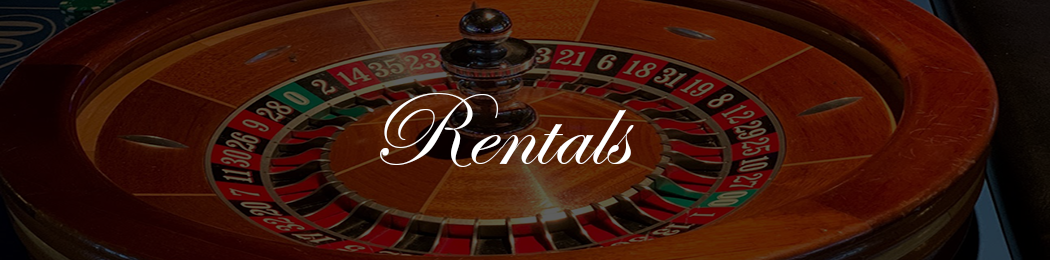
<style>
.page{position:relative;width:1050px;height:260px}
.page>*{position:absolute;margin:0}
.t1{font:106.6px "EdwardianScriptITC";color:#ffffff}
</style>
<div class="page">
<p class="t1" style="left:380px;top:93px;width:254px;height:74px">Rentals</p>
</div>
